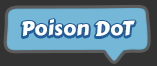
<style>
.page{position:relative;width:157px;height:66px;background:#74b7d7}
.page>*{position:absolute;margin:0}
.t1{font:20px "CarterOne";letter-spacing:0.025em;color:#ffffff}
</style>
<div class="page">
<p class="t1" style="left:22px;top:19px;width:113px;height:17px">Poison DoT</p>
</div>
